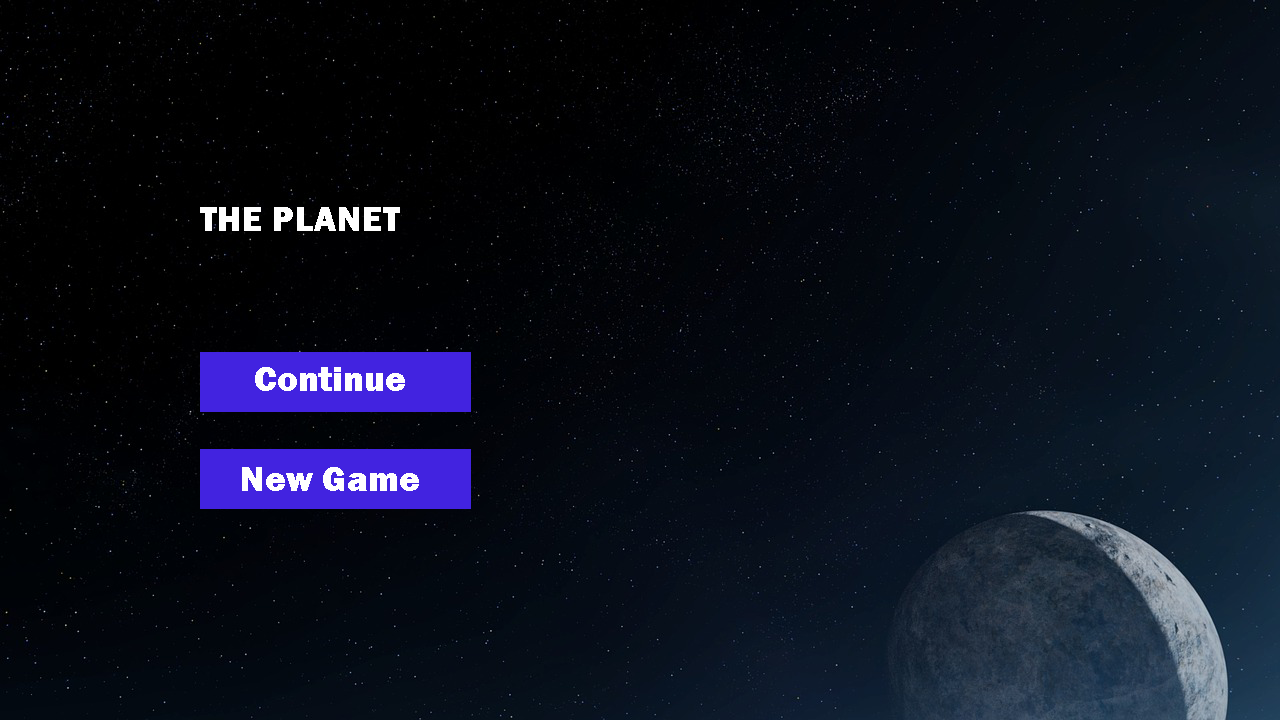
<style>
.page{position:relative;width:1280px;height:720px}
.page>*{position:absolute;margin:0}
.t1{font:36px "FranklinGothic-Heavy";color:#ffffff}
</style>
<div class="page">
<p class="t1" style="left:200px;top:207px;width:200px;height:24px">THE PLANET</p>
<p class="t1" style="left:255px;top:367px;width:150px;height:24px">Continue</p>
<p class="t1" style="left:242px;top:467px;width:177px;height:24px">New Game</p>
</div>
